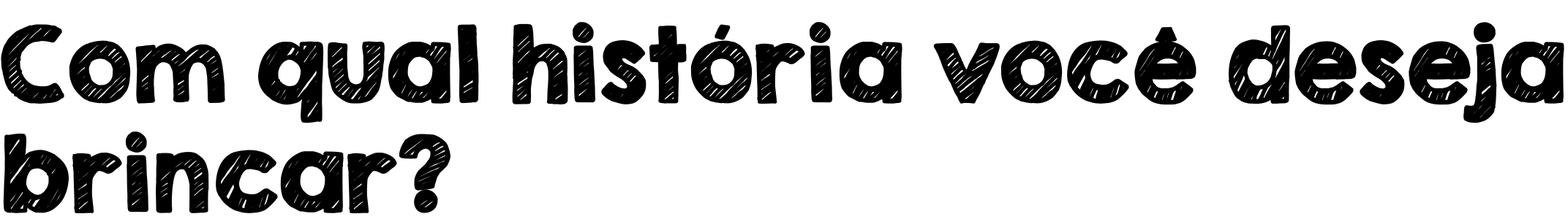
<style>
.page{position:relative;width:1568px;height:222px;background:#ffffff}
.page>*{position:absolute;margin:0}
.t1{font:91.4px "KGSecondChancesSketch";color:#000000;font-weight:bold}
</style>
<div class="page">
<p class="t1" style="left:1px;top:22px;width:1563px;height:192px">Com qual história você deseja<br>brincar?</p>
</div>
